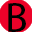
<style>
.page{position:relative;width:32px;height:32px;background:#ec0229}
.page>*{position:absolute;margin:0}
.t1{font:12px "MyriadPro-Regular";color:#000000}
</style>
<div class="page">
<p class="t1" style="left:8px;top:3px;width:18px;height:29px">B</p>
</div>
